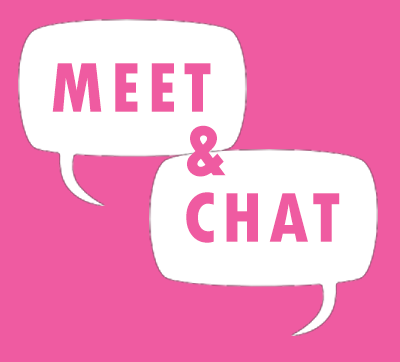
<style>
.page{position:relative;width:400px;height:362px;background:#ef5ba1}
.page>*{position:absolute;margin:0}
.t1{font:74.2px "TwCenMT-CondensedExtraBold";letter-spacing:0.075em;color:#ef5ba1;text-transform:uppercase}
</style>
<div class="page">
<p class="t1" style="left:52px;top:63px;width:159px;height:49px">MeeT</p>
<p class="t1" style="left:187px;top:125px;width:39px;height:52px">&amp;</p>
<p class="t1" style="left:186px;top:192px;width:154px;height:51px">CHAT</p>
</div>
